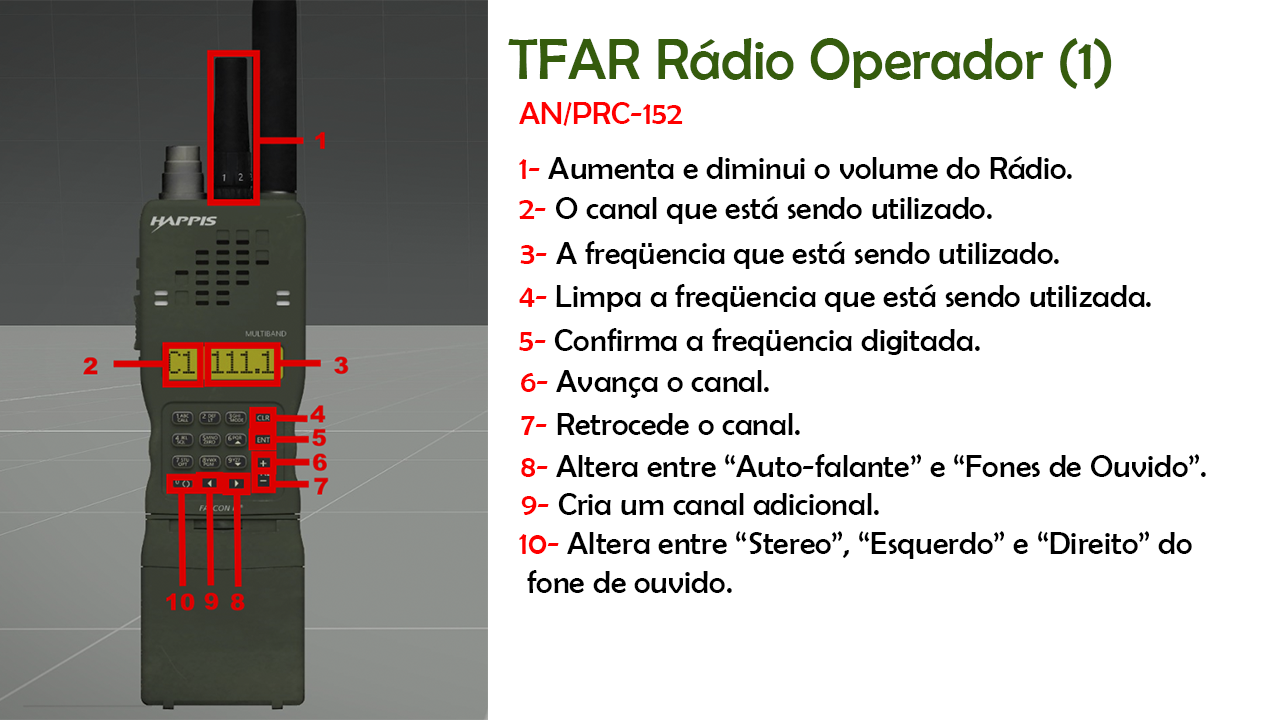
<style>
.page{position:relative;width:1280px;height:720px;background:#ffffff}
.page>*{position:absolute;margin:0}
.t1{font:57.6px "BerlinSansFB-Reg";color:#355c0d}
.t2{font:32px "BerlinSansFB-Reg";color:#ff0000}
.t3{font:32px "BerlinSansFB-Reg";color:#000000}
</style>
<div class="page">
<p class="t1" style="left:508px;top:38px;width:604px;height:51px">TFAR Rádio Operador (1)</p>
<p class="t2" style="left:519px;top:102px;width:164px;height:24px">AN/PRC-152</p>
<p class="t3" style="left:519px;top:156px;width:553px;height:23px"><span class="t2">1- </span>Aumenta e diminui o volume do Rádio.</p>
<p class="t3" style="left:519px;top:196px;width:473px;height:28px"><span class="t2">2- </span>O canal que está sendo utilizado.</p>
<p class="t3" style="left:520px;top:241px;width:539px;height:28px"><span class="t2">3- </span>A freqüencia que está sendo utilizado.</p>
<p class="t3" style="left:519px;top:284px;width:632px;height:28px"><span class="t2">4- </span>Limpa a freqüencia que está sendo utilizada.</p>
<p class="t3" style="left:519px;top:328px;width:461px;height:28px"><span class="t2">5- </span>Confirma a freqüencia digitada.</p>
<p class="t3" style="left:521px;top:370px;width:248px;height:28px"><span class="t2">6- </span>Avança o canal.</p>
<p class="t3" style="left:521px;top:413px;width:279px;height:22px"><span class="t2">7- </span>Retrocede o canal.</p>
<p class="t3" style="left:521px;top:454px;width:685px;height:23px"><span class="t2">8- </span>Altera entre “Auto-falante” e “Fones de Ouvido”.</p>
<p class="t3" style="left:521px;top:493px;width:358px;height:22px"><span class="t2">9- </span>Cria um canal adicional.</p>
<p class="t3" style="left:519px;top:531px;width:673px;height:62px"><span class="t2">10- </span>Altera entre “Stereo”, “Esquerdo” e “Direito” do<br> fone de ouvido.</p>
</div>
